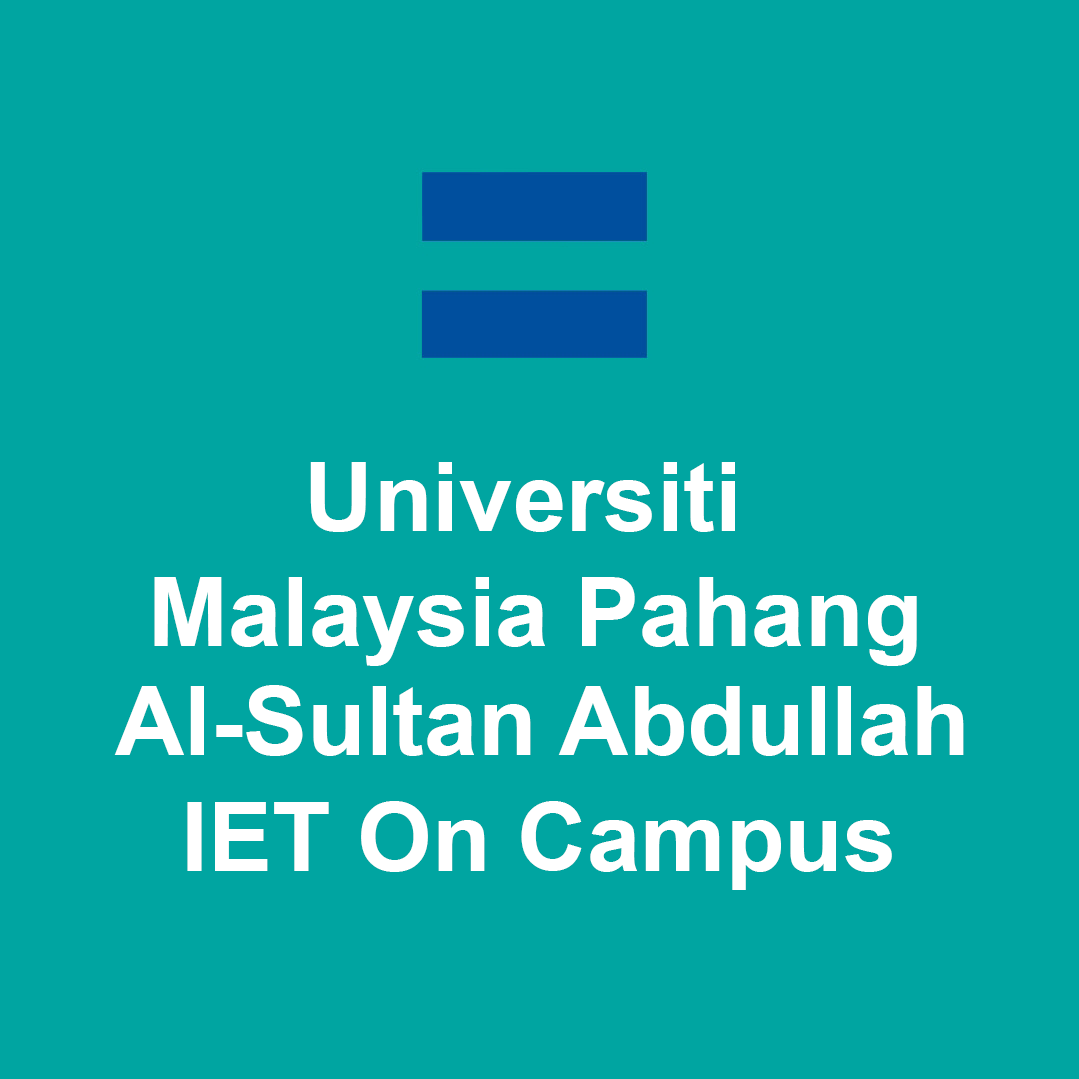
<style>
.page{position:relative;width:1079px;height:1079px;background:#00a5a1}
.page>*{position:absolute;margin:0}
.t1{font:96px "Arial-BoldMT";color:#ffffff}
</style>
<div class="page">
<p class="t1" style="left:310px;top:462px;width:425px;height:70px">Universiti</p>
<p class="t1" style="left:154px;top:577px;width:763px;height:89px">Malaysia Pahang</p>
<p class="t1" style="left:114px;top:685px;width:850px;height:71px">Al-Sultan Abdullah</p>
<p class="t1" style="left:187px;top:801px;width:705px;height:89px">IET On Campus</p>
</div>
